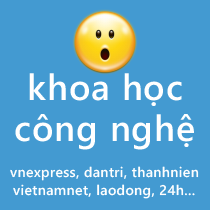
<style>
.page{position:relative;width:210px;height:210px;background:#439ad1}
.page>*{position:absolute;margin:0}
.t1{font:36px "SegoeWP-Semibold";letter-spacing:0.025em;color:#ffffff}
.t2{font:14px "SegoeWP-Semibold";letter-spacing:0.025em;color:#fefefe}
.t3{font:14px "SegoeWP-Semibold";letter-spacing:0.025em;color:#ffffff}
</style>
<div class="page">
<p class="t1" style="left:29px;top:73px;width:153px;height:33px">khoa học</p>
<p class="t1" style="left:15px;top:114px;width:179px;height:36px">công nghệ</p>
<p class="t2" style="left:10px;top:166px;width:189px;height:15px">vnexpress, dantri, thanhnien</p>
<p class="t3" style="left:13px;top:184px;width:182px;height:15px">vietnamnet, laodong, 24h...</p>
</div>
